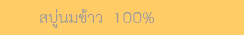
<style>
.page{position:relative;width:244px;height:35px;background:#ffcc66}
.page>*{position:absolute;margin:0}
.t1{font:22px "THK2DJuly8";color:#999999}
</style>
<div class="page">
<p class="t1" style="left:39px;top:9px;width:115px;height:19px">สบู่นมข้าว 100%</p>
</div>
